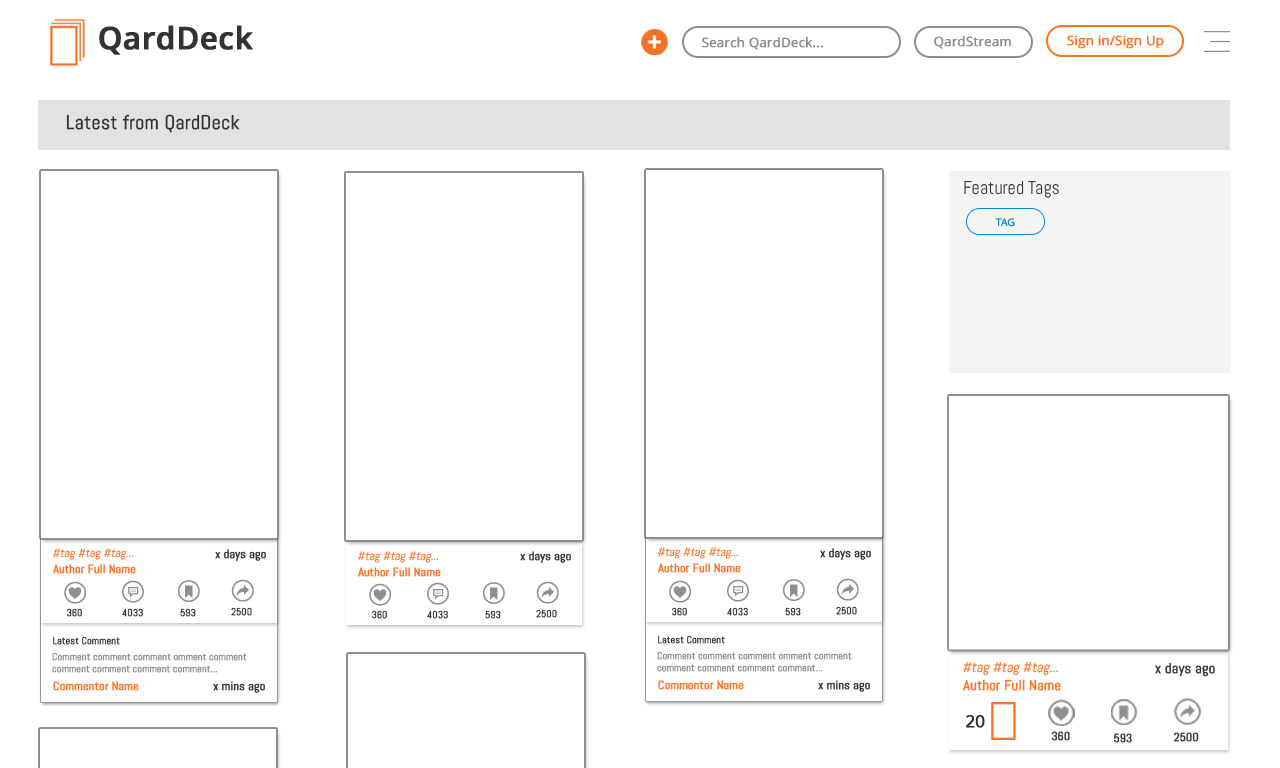
<style>
.page{position:relative;width:1280px;height:768px;background:#ffffff}
.page>*{position:absolute;margin:0}
.t1{font:30.9px "OpenSans-Semibold";color:#323232;font-weight:bold}
.t2{font:13px "OpenSans";color:#8d8d8d;font-weight:bold}
.t3{font:13px "OpenSans";color:#ff741b;font-weight:bold}
.t4{font:20px "Abel-Regular";color:#323232;font-weight:bold}
.t5{font:18px "Abel-Regular";color:#323232}
.t6{font:10.5px "OpenSans";color:#0082d5;text-transform:uppercase}
.t7{font:12px "Abel-Regular";font-style:italic}
.t8{font:12px "Abel-Regular";color:#323232;font-weight:bold}
.t9{font:12px "Abel-Regular";color:#ff731b;font-weight:bold}
.t10{font:10px "Abel-Regular";color:#323232;font-weight:bold}
.t11{font:10px "Abel-Regular";color:#8d8d8d;font-weight:bold}
.t12{font:14.2px "Abel-Regular";color:#ff731b;font-style:italic}
.t13{font:14.2px "Abel-Regular";color:#323232;font-weight:bold}
.t14{font:14.2px "Abel-Regular";color:#ff731b;font-weight:bold}
.t15{font:16.9px "OpenSans";color:#323232;font-weight:bold}
.t16{font:11.8px "Abel-Regular";color:#323232;font-weight:bold}
</style>
<div class="page">
<p class="t1" style="left:99px;top:25px;width:154px;height:30px">QardDeck</p>
<p class="t2" style="left:702px;top:36px;width:122px;height:14px">Search QardDeck...</p>
<p class="t2" style="left:934px;top:35px;width:77px;height:14px">QardStream</p>
<p class="t3" style="left:1067px;top:35px;width:97px;height:14px">Sign in/Sign Up</p>
<p class="t4" style="left:66px;top:114px;width:174px;height:19px">Latest from QardDeck</p>
<p class="t5" style="left:964px;top:181px;width:95px;height:17px">Featured Tags</p>
<p class="t6" style="left:995px;top:218px;width:20px;height:9px">Tag</p>
<p class="t7" style="left:53px;top:548px;width:80px;height:12px">#tag #tag #tag...</p>
<p class="t8" style="left:215px;top:549px;width:51px;height:12px">x days ago</p>
<p class="t7" style="left:358px;top:551px;width:80px;height:12px">#tag #tag #tag...</p>
<p class="t8" style="left:520px;top:551px;width:51px;height:12px">x days ago</p>
<p class="t7" style="left:658px;top:547px;width:80px;height:12px">#tag #tag #tag...</p>
<p class="t8" style="left:820px;top:548px;width:51px;height:12px">x days ago</p>
<p class="t9" style="left:53px;top:564px;width:83px;height:10px">Author Full Name</p>
<p class="t9" style="left:358px;top:567px;width:83px;height:10px">Author Full Name</p>
<p class="t9" style="left:658px;top:563px;width:83px;height:10px">Author Full Name</p>
<p class="t10" style="left:836px;top:606px;width:21px;height:9px">2500</p>
<p class="t10" style="left:67px;top:608px;width:15px;height:9px">360</p>
<p class="t10" style="left:122px;top:608px;width:21px;height:9px">4033</p>
<p class="t10" style="left:180px;top:608px;width:16px;height:9px">593</p>
<p class="t10" style="left:231px;top:607px;width:21px;height:9px">2500</p>
<p class="t10" style="left:372px;top:610px;width:15px;height:9px">360</p>
<p class="t10" style="left:427px;top:610px;width:21px;height:9px">4033</p>
<p class="t10" style="left:485px;top:610px;width:16px;height:9px">593</p>
<p class="t10" style="left:536px;top:609px;width:21px;height:9px">2500</p>
<p class="t10" style="left:672px;top:607px;width:15px;height:9px">360</p>
<p class="t10" style="left:727px;top:607px;width:21px;height:9px">4033</p>
<p class="t10" style="left:785px;top:607px;width:16px;height:9px">593</p>
<p class="t10" style="left:53px;top:636px;width:67px;height:9px">Latest Comment</p>
<p class="t10" style="left:658px;top:635px;width:67px;height:9px">Latest Comment</p>
<p class="t11" style="left:52px;top:652px;width:195px;height:21px">Comment comment comment omment comment <br>comment comment comment comment...</p>
<p class="t11" style="left:657px;top:651px;width:195px;height:21px">Comment comment comment omment comment <br>comment comment comment comment...</p>
<p class="t12" style="left:963px;top:661px;width:95px;height:14px">#tag #tag #tag...</p>
<p class="t13" style="left:1155px;top:662px;width:60px;height:15px">x days ago</p>
<p class="t9" style="left:53px;top:681px;width:86px;height:10px">Commentor Name</p>
<p class="t8" style="left:213px;top:681px;width:52px;height:12px">x mins ago</p>
<p class="t9" style="left:658px;top:680px;width:86px;height:10px">Commentor Name</p>
<p class="t8" style="left:818px;top:680px;width:52px;height:12px">x mins ago</p>
<p class="t14" style="left:963px;top:679px;width:98px;height:12px">Author Full Name</p>
<p class="t15" style="left:966px;top:715px;width:19px;height:13px">20</p>
<p class="t16" style="left:1051px;top:731px;width:19px;height:10px">360</p>
<p class="t16" style="left:1113px;top:733px;width:19px;height:10px">593</p>
<p class="t16" style="left:1173px;top:732px;width:26px;height:10px">2500</p>
</div>
